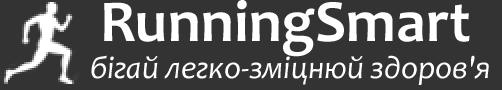
<style>
.page{position:relative;width:502px;height:90px;background:#333333}
.page>*{position:absolute;margin:0}
.t1{font:60px "Candara-Bold";color:#ffffff}
.t2{font:32px "Candara-Italic";color:#ffffff}
</style>
<div class="page">
<p class="t1" style="left:104px;top:0px;width:366px;height:57px">RunningSmart</p>
<p class="t2" style="left:91px;top:55px;width:398px;height:30px">бігай легко-зміцнюй здоров'я</p>
</div>
